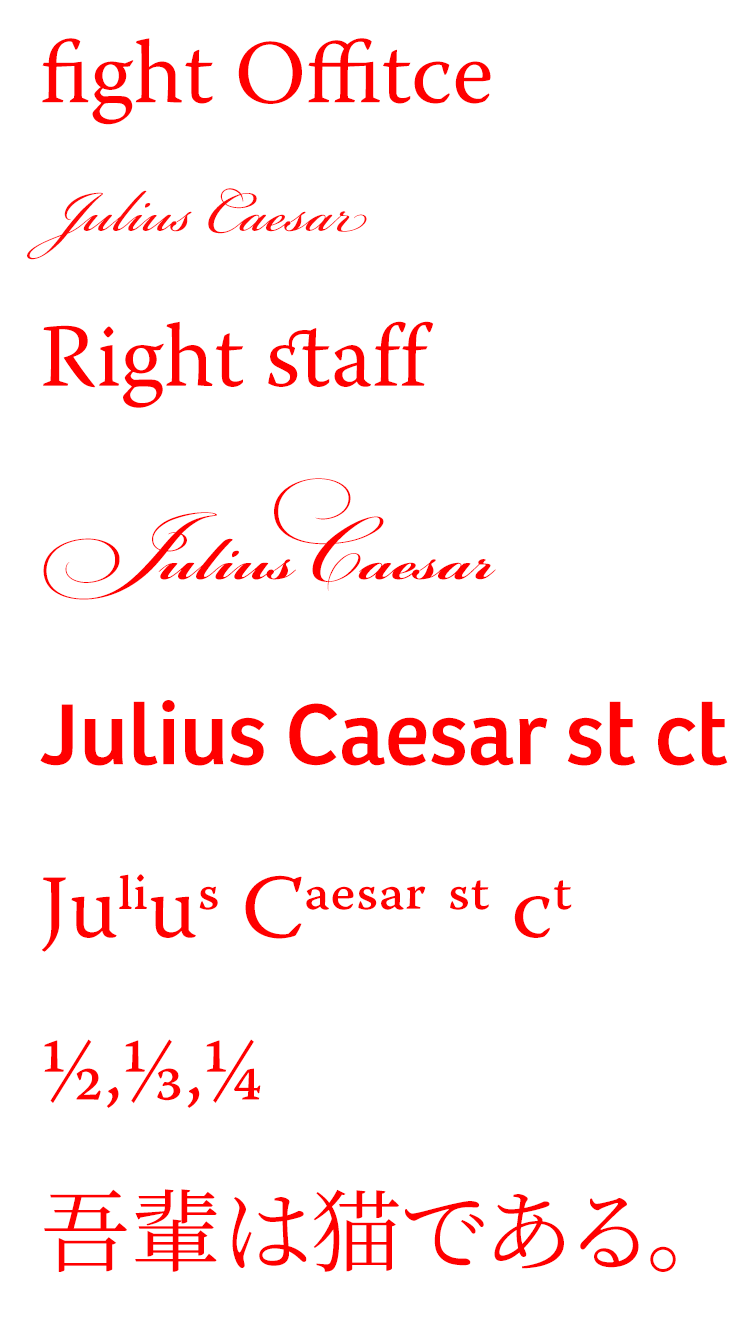
<style>
.page{position:relative;width:750px;height:1334px;background:#ffffff}
.page>*{position:absolute;margin:0}
.t1{font:90px "WarnockPro-Regular";color:#ff0000}
.t2{font:90px "BickhamScriptPro3";color:#ff0a0a}
.t3{font:90px "BickhamScriptPro3-Bold";color:#ff0000}
.t4{font:90px "Bree-Regular";color:#ff0000}
.t5{font:90px "SourceHanSerif-Regular";color:#ff0000}
</style>
<div class="page">
<p class="t1" style="left:42px;top:38px;width:449px;height:87px">fight Offitce</p>
<p class="t2" style="left:27px;top:188px;width:340px;height:72px">Julius Caesar</p>
<p class="t1" style="left:43px;top:321px;width:391px;height:87px">Right staff</p>
<p class="t3" style="left:43px;top:478px;width:453px;height:122px">Julius Caesar</p>
<p class="t4" style="left:40px;top:700px;width:688px;height:66px">Julius Caesar st ct</p>
<p class="t1" style="left:42px;top:874px;width:530px;height:78px">Julius Caesar st ct</p>
<p class="t1" style="left:44px;top:1039px;width:217px;height:69px">1/2,1/3,1/4</p>
<p class="t5" style="left:44px;top:1189px;width:632px;height:83px">吾輩は猫である。</p>
</div>
